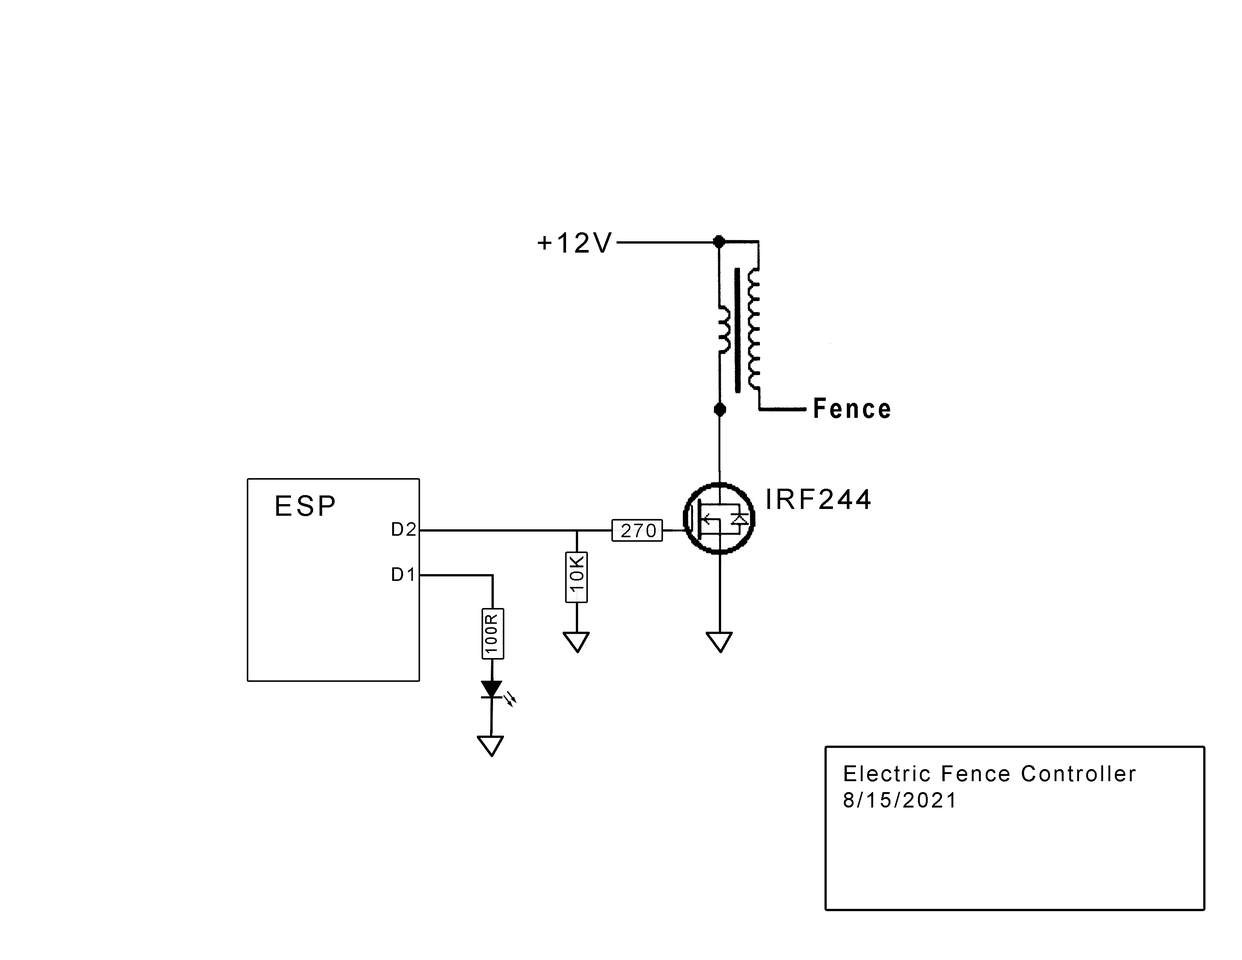
<style>
.page{position:relative;width:1242px;height:960px;background:#ffffff}
.page>*{position:absolute;margin:0}
.t1{font:28.2px "ArialMT";letter-spacing:0.1em;color:#000000}
.t2{font:28.2px "ArialNarrow-Bold";letter-spacing:0.1em;color:#000000}
.t3{font:18.8px "ArialMT";letter-spacing:0.1em;color:#000000}
.t4{font:22px "ArialMT";letter-spacing:0.1em;color:#000000}
</style>
<div class="page">
<p class="t1" style="left:538px;top:232px;width:74px;height:21px">+12V</p>
<p class="t2" style="left:815px;top:398px;width:75px;height:20px">Fence</p>
<p class="t1" style="left:276px;top:495px;width:59px;height:21px">ESP</p>
<p class="t1" style="left:768px;top:489px;width:103px;height:20px">IRF244</p>
<p class="t3" style="left:392px;top:522px;width:24px;height:14px">D2</p>
<p class="t3" style="left:621px;top:524px;width:35px;height:13px">270</p>
<p class="t3" style="left:570px;top:556px;width:13px;height:36px;rotate:-90deg">10K</p>
<p class="t3" style="left:392px;top:567px;width:21px;height:14px">D1</p>
<p class="t4" style="left:844px;top:765px;width:292px;height:42px">Electric Fence Controller<br>8/15/2021</p>
</div>
